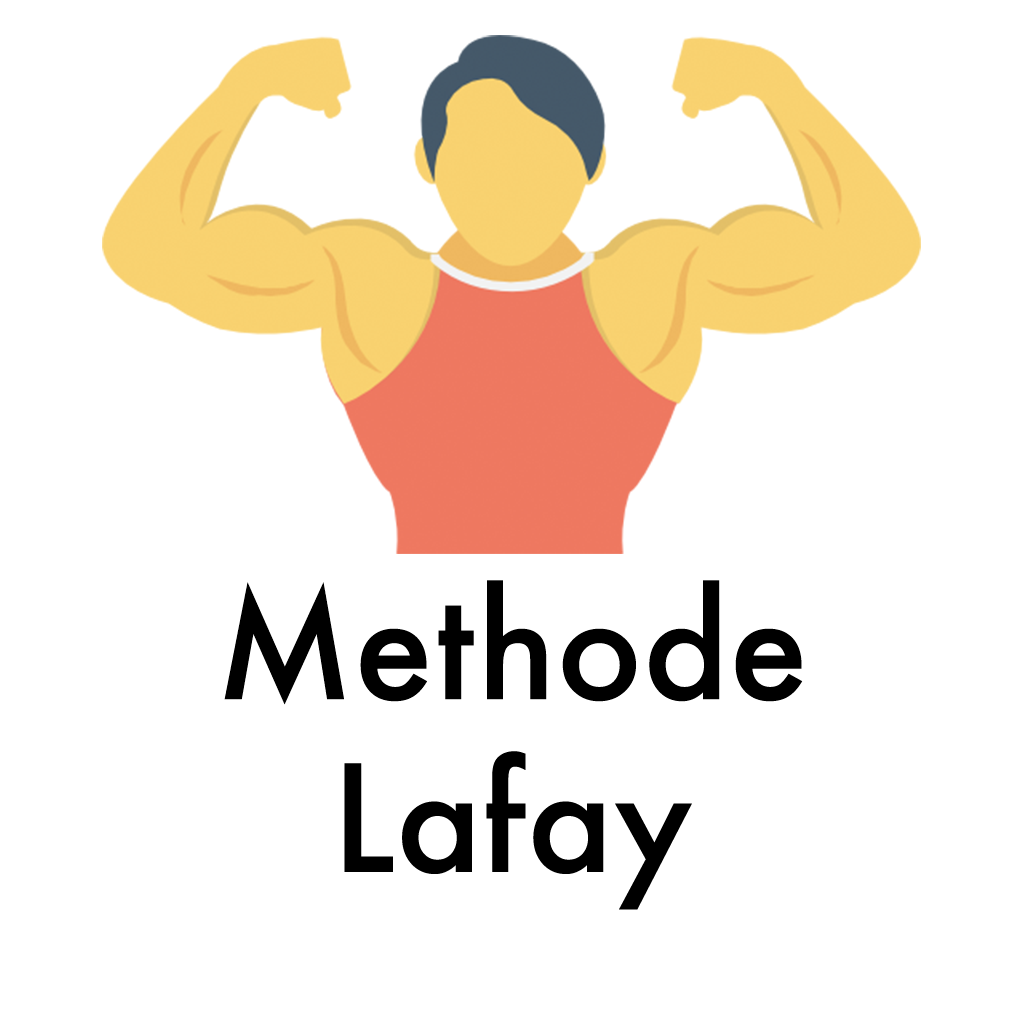
<style>
.page{position:relative;width:1024px;height:1024px;background:#ffffff}
.page>*{position:absolute;margin:0}
.t1{font:144px "Futura-Medium";color:#000000}
</style>
<div class="page">
<p class="t1" style="left:224px;top:580px;width:579px;height:330px;text-align:center">Methode<br>Lafay</p>
</div>
